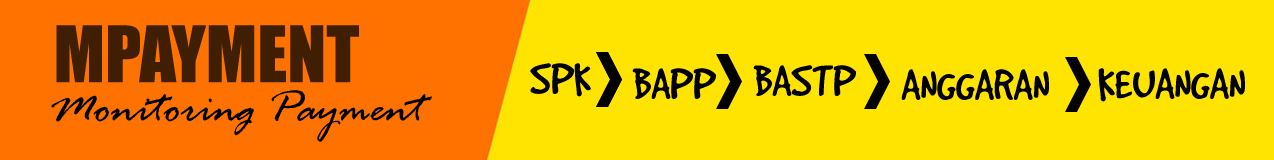
<style>
.page{position:relative;width:1274px;height:160px;background:#ffe401}
.page>*{position:absolute;margin:0}
.t1{font:72px "Impact";color:#401e02}
.t2{font:48px "GoodDog";color:#000000}
.t3{font:48px "RageItalic";color:#000000}
</style>
<div class="page">
<p class="t1" style="left:56px;top:25px;width:303px;height:58px">MPAYMENT</p>
<p class="t2" style="left:530px;top:63px;width:61px;height:34px">SPK</p>
<p class="t2" style="left:753px;top:65px;width:103px;height:31px">BASTP</p>
<p class="t2" style="left:632px;top:68px;width:84px;height:31px">BAPP</p>
<p class="t2" style="left:901px;top:69px;width:148px;height:31px">ANGGARAN</p>
<p class="t2" style="left:1098px;top:68px;width:147px;height:34px">KEUANGAN</p>
<p class="t3" style="left:51px;top:90px;width:381px;height:52px">Monitoring Payment</p>
</div>
